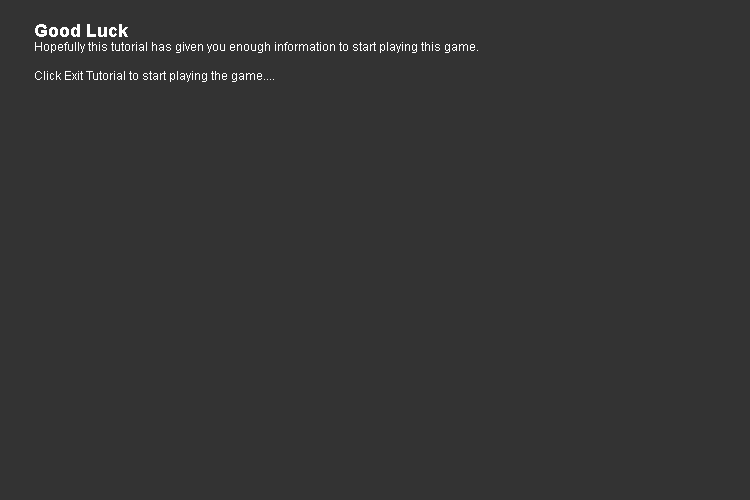
<style>
.page{position:relative;width:750px;height:500px;background:#333333}
.page>*{position:absolute;margin:0}
.t1{font:12px "ArialMT";color:#ffffff}
.t2{font:18px "Arial-BoldMT";color:#ffffff}
</style>
<div class="page">
<p class="t1" style="left:35px;top:24px;width:443px;height:58px"><span class="t2">Good Luck<br></span>Hopefully this tutorial has given you enough information to start playing this game.<br><br>Click Exit Tutorial to start playing the game....</p>
</div>
